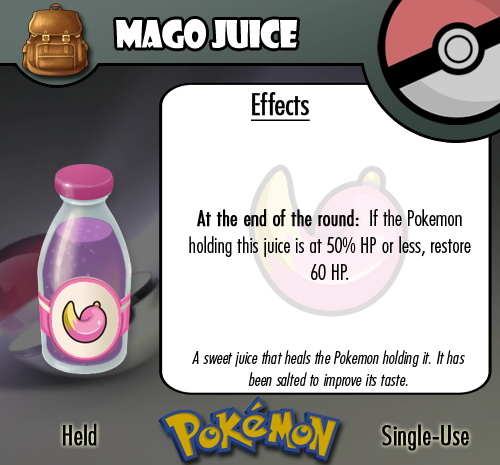
<style>
.page{position:relative;width:500px;height:465px;background:#ffffff}
.page>*{position:absolute;margin:0}
.t1{font:36.7px "ShowcardGothic-Reg";letter-spacing:-0.025em;color:#ffffff;scale:0.91 1}
.t2{font:22.2px "FuturaCondensedBQ-Light";color:#010101}
.t3{font:27.8px "FuturaCondensedBQ-Light";color:#010101;font-weight:bold}
.t4{font:30.6px "FuturaCondensedBQ-Light";color:#010101;font-weight:bold;text-decoration:underline}
.t5{font:22.2px "FuturaCondensedBQ-Light";color:#010101;font-weight:bold}
.t6{font:18.1px "FuturaCondensedBQ-Light";color:#010101;font-style:italic}
</style>
<div class="page">
<p class="t1" style="left:116px;top:19px;width:181px;height:30px">Mago Juice</p>
<p class="t2" style="left:189px;top:92px;width:282px;height:188px"><span class="t3">  </span><span class="t4">Effects<br><br><br><br><br><br></span><span class="t5">At the end of the round:</span>  If the Pokemon holding this juice is at 50% HP or less, restore 60 HP.</p>
<p class="t6" style="left:192px;top:350px;width:273px;height:39px;text-align:center">A sweet juice that heals the Pokemon holding it. It has been salted to improve its taste.</p>
<p class="t3" style="left:63px;top:423px;width:34px;height:23px">Held</p>
<p class="t3" style="left:382px;top:424px;width:87px;height:27px">Single-Use</p>
</div>
